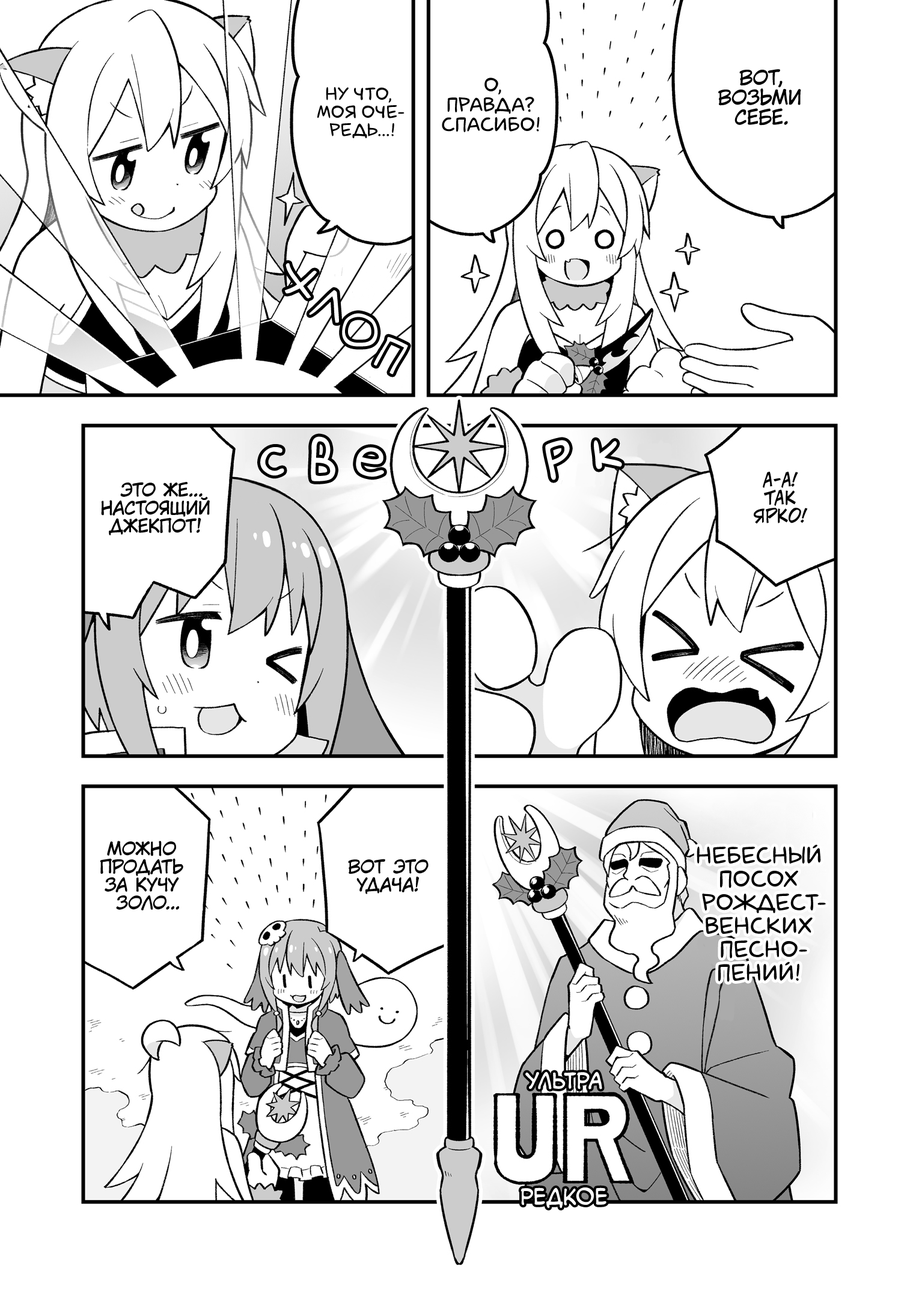
<style>
.page{position:relative;width:919px;height:1298px;background:#ffffff}
.page>*{position:absolute;margin:0}
.t1{font:19.8px "laCartoonerie";color:#000000;text-transform:uppercase}
.t2{font:19.8px "KuraiVoice2";color:#000000;text-transform:uppercase}
.t3{font:18px "laCartoonerie";color:#000000;text-transform:uppercase}
.t4{font:43.3px "v_Augie";color:#ffffff;text-transform:uppercase}
.t5{font:59.5px "laCartoonerie";color:#ffffff;scale:0.91 1}
.t6{font:57.7px "laCartoonerie";color:#ffffff}
.t7{font:54.1px "laCartoonerie";color:#ffffff;scale:1.1 1}
.t8{font:54.1px "laCartoonerie";color:#ffffff}
.t9{font:55.9px "laCartoonerie";color:#ffffff}
.t10{font:18px "v_CCJeffCampbell";color:#000000;text-transform:uppercase}
.t11{font:18px "KuraiVoice2";color:#000000;text-transform:uppercase}
.t12{font:23.4px "laCartoonerie";color:#000000;text-transform:uppercase}
.t13{font:21.6px "v_CCMonologous";color:#ffffff;text-transform:uppercase}
</style>
<div class="page">
<p class="t1" style="left:442px;top:78px;width:98px;height:54px;text-align:center">О,<br>правда?<br>Спасибо!</p>
<p class="t2" style="left:718px;top:69px;width:83px;height:57px;text-align:center">Вот,<br>возьми<br>себе.</p>
<p class="t3" style="left:317px;top:87px;width:87px;height:51px;text-align:center">Ну что,<br>моя оче-<br>редь...!</p>
<p class="t4" style="left:284px;top:263px;width:33px;height:36px;rotate:24deg">х</p>
<p class="t4" style="left:309px;top:290px;width:30px;height:33px;rotate:27deg">л</p>
<p class="t4" style="left:342px;top:313px;width:36px;height:34px">о</p>
<p class="t5" style="left:311px;top:436px;width:24px;height:45px;rotate:2deg">в</p>
<p class="t6" style="left:260px;top:447px;width:24px;height:29px;rotate:10deg">с</p>
<p class="t7" style="left:356px;top:447px;width:28px;height:30px;rotate:4deg">е</p>
<p class="t8" style="left:545px;top:440px;width:25px;height:40px;rotate:-8deg">р</p>
<p class="t9" style="left:594px;top:440px;width:28px;height:29px;rotate:-6deg">к</p>
<p class="t10" style="left:754px;top:472px;width:54px;height:51px;text-align:center">А-а!<br>Так<br>ярко!</p>
<p class="t11" style="left:101px;top:482px;width:109px;height:53px;text-align:center">Это же...<br>настоящий<br>джекпот!</p>
<p class="t11" style="left:100px;top:841px;width:83px;height:69px;text-align:center">Можно<br>продать<br>за кучу<br>золо...</p>
<p class="t12" style="left:696px;top:844px;width:130px;height:138px;text-align:center">Небесный<br>посох<br>рождест-<br>венских<br>песно-<br>пений!</p>
<p class="t11" style="left:348px;top:859px;width:80px;height:35px;text-align:center">Вот это<br>удача!</p>
<p class="t13" style="left:525px;top:1071px;width:77px;height:18px">ультра</p>
<p class="t13" style="left:520px;top:1187px;width:87px;height:21px">редкое</p>
</div>
